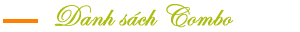
<style>
.page{position:relative;width:300px;height:32px;background:#ffffff}
.page>*{position:absolute;margin:0}
.t1{font:30px "UTM-Edwardian";color:#acbd0f;font-weight:bold}
</style>
<div class="page">
<p class="t1" style="left:54px;top:4px;width:180px;height:24px">Danh sách Combo</p>
</div>
